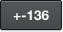
<style>
.page{position:relative;width:63px;height:32px}
.page>*{position:absolute;margin:0}
.t1{font:13.4px "HelveticaNeueBold";color:#ffffff}
</style>
<div class="page">
<p class="t1" style="left:13px;top:10px;width:36px;height:11px">+-136</p>
</div>
